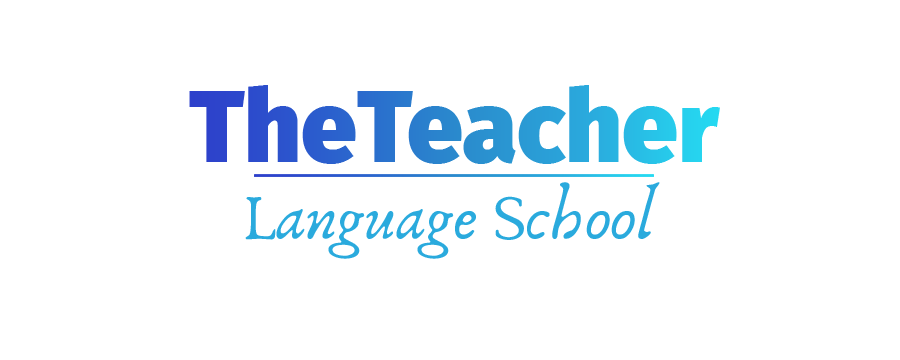
<style>
.page{position:relative;width:900px;height:360px;background:#ffffff}
.page>*{position:absolute;margin:0}
.t1{font:100px "FiraSans-Black"}
.t2{font:66.7px "Anaktoria";color:#2aaadd}
</style>
<div class="page">
<p class="t1" style="left:189px;top:85px;width:531px;height:79px">TheTeacher</p>
<p class="t2" style="left:245px;top:182px;width:415px;height:77px">Language School</p>
</div>
